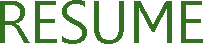
<style>
.page{position:relative;width:203px;height:44px;background:#ffffff}
.page>*{position:absolute;margin:0}
.t1{font:60px "Leelawadee";color:#347122;scale:0.96 1}
</style>
<div class="page">
<p class="t1" style="left:0px;top:0px;width:203px;height:44px">RESUME</p>
</div>
